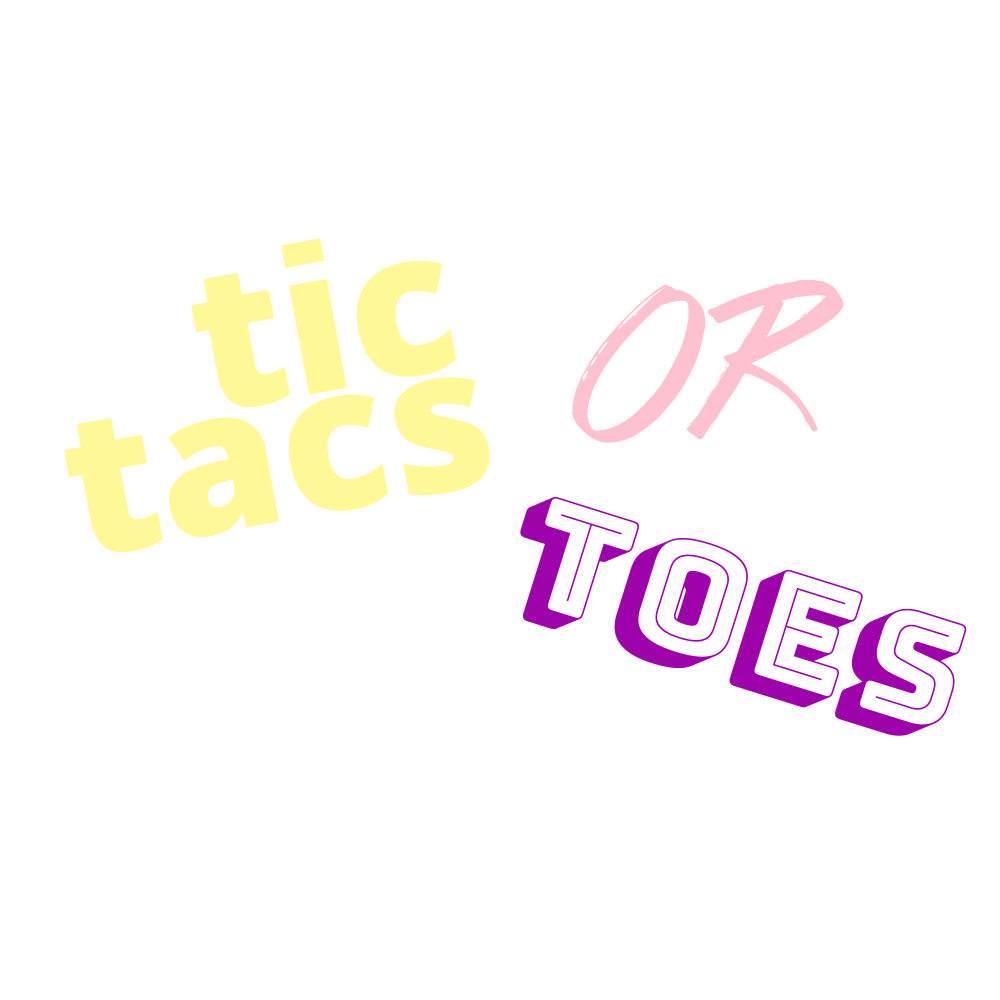
<style>
.page{position:relative;width:1000px;height:1000px;background:#ffffff}
.page>*{position:absolute;margin:0}
.t1{font:200px "WLMIdea-Regular";color:#fef897}
.t2{font:150px "ColorsOfAutumn";color:#fdc1d0}
.t3{font:150px "Bungee-Shade";color:#9d02ab}
</style>
<div class="page">
<p class="t1" style="left:191px;top:238px;width:265px;height:169px;rotate:-10deg">tic</p>
<p class="t2" style="left:572px;top:279px;width:272px;height:164px;rotate:-2deg">OR</p>
<p class="t1" style="left:64px;top:377px;width:426px;height:175px;rotate:-10deg">tacs</p>
<p class="t3" style="left:520px;top:496px;width:447px;height:240px;rotate:17deg">TOES</p>
</div>
